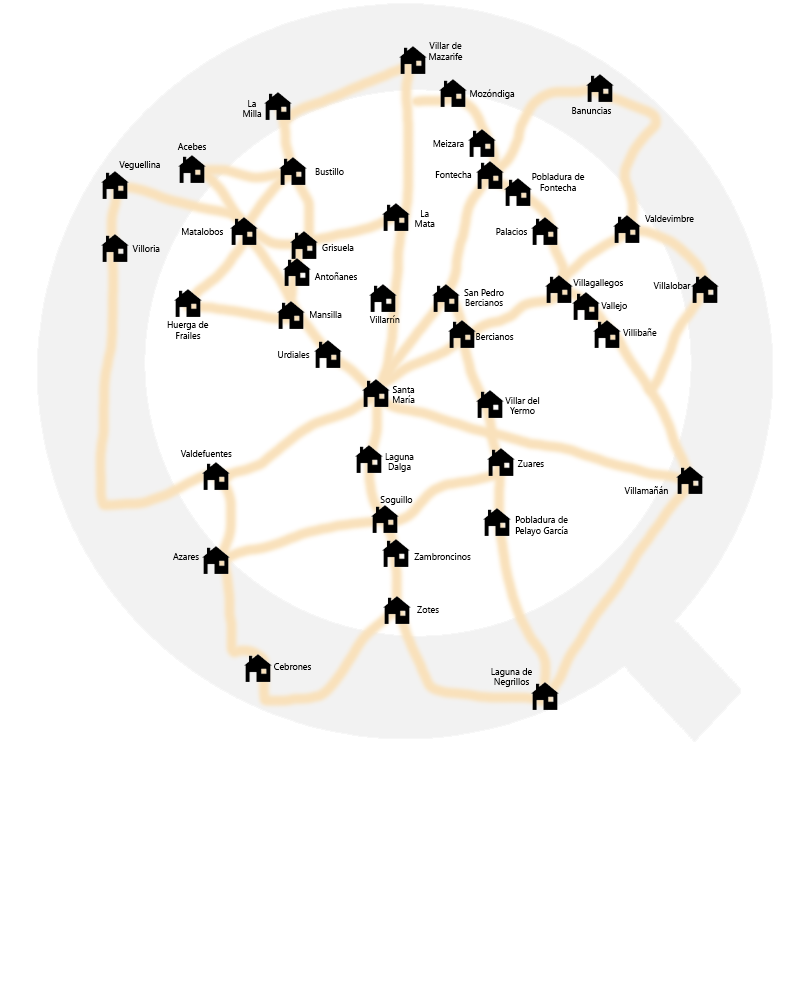
<style>
.page{position:relative;width:800px;height:1000px;background:#ffffff}
.page>*{position:absolute;margin:0}
.t1{font:9px "NirmalaUI";color:#000000}
</style>
<div class="page">
<p class="t1" style="left:429px;top:42px;width:34px;height:18px;text-align:center">Villar de Mazarife</p>
<p class="t1" style="left:470px;top:89px;width:45px;height:10px">Mozóndiga</p>
<p class="t1" style="left:243px;top:100px;width:19px;height:17px;text-align:center">La Milla</p>
<p class="t1" style="left:572px;top:107px;width:39px;height:7px">Banuncias</p>
<p class="t1" style="left:177px;top:143px;width:29px;height:7px">Acebes</p>
<p class="t1" style="left:433px;top:140px;width:31px;height:7px">Meizara</p>
<p class="t1" style="left:119px;top:161px;width:41px;height:9px">Veguellina</p>
<p class="t1" style="left:315px;top:168px;width:29px;height:7px">Bustillo</p>
<p class="t1" style="left:435px;top:171px;width:37px;height:7px">Fontecha</p>
<p class="t1" style="left:532px;top:173px;width:53px;height:18px;text-align:center">Pobladura de Fontecha</p>
<p class="t1" style="left:415px;top:210px;width:20px;height:17px;text-align:center">La Mata</p>
<p class="t1" style="left:645px;top:215px;width:49px;height:7px">Valdevimbre</p>
<p class="t1" style="left:182px;top:228px;width:41px;height:7px">Matalobos</p>
<p class="t1" style="left:496px;top:228px;width:31px;height:7px">Palacios</p>
<p class="t1" style="left:132px;top:245px;width:28px;height:7px">Villoria</p>
<p class="t1" style="left:322px;top:244px;width:32px;height:7px">Grisuela</p>
<p class="t1" style="left:314px;top:272px;width:43px;height:8px">Antoñanes</p>
<p class="t1" style="left:573px;top:279px;width:50px;height:9px">Villagallegos</p>
<p class="t1" style="left:464px;top:289px;width:40px;height:17px;text-align:center">San Pedro Bercianos</p>
<p class="t1" style="left:653px;top:282px;width:38px;height:7px">Villalobar</p>
<p class="t1" style="left:601px;top:302px;width:26px;height:9px">Vallejo</p>
<p class="t1" style="left:310px;top:311px;width:32px;height:7px">Mansilla</p>
<p class="t1" style="left:369px;top:315px;width:31px;height:8px">Villarrín</p>
<p class="t1" style="left:167px;top:321px;width:42px;height:18px;text-align:center">Huerga de Frailes</p>
<p class="t1" style="left:623px;top:328px;width:34px;height:8px">Villibañe</p>
<p class="t1" style="left:476px;top:333px;width:38px;height:7px">Bercianos</p>
<p class="t1" style="left:278px;top:351px;width:32px;height:7px">Urdiales</p>
<p class="t1" style="left:392px;top:386px;width:23px;height:17px;text-align:center">Santa María</p>
<p class="t1" style="left:505px;top:397px;width:35px;height:17px;text-align:center">Villar del Yermo</p>
<p class="t1" style="left:180px;top:450px;width:52px;height:7px">Valdefuentes</p>
<p class="t1" style="left:385px;top:453px;width:29px;height:19px;text-align:center">Laguna Dalga</p>
<p class="t1" style="left:517px;top:460px;width:27px;height:7px">Zuares</p>
<p class="t1" style="left:624px;top:486px;width:44px;height:8px">Villamañán</p>
<p class="t1" style="left:380px;top:496px;width:33px;height:9px">Soguillo</p>
<p class="t1" style="left:515px;top:516px;width:53px;height:20px;text-align:center">Pobladura de Pelayo García</p>
<p class="t1" style="left:173px;top:553px;width:26px;height:7px">Azares</p>
<p class="t1" style="left:414px;top:553px;width:57px;height:7px">Zambroncinos</p>
<p class="t1" style="left:417px;top:606px;width:22px;height:7px">Zotes</p>
<p class="t1" style="left:274px;top:663px;width:37px;height:7px">Cebrones</p>
<p class="t1" style="left:491px;top:668px;width:41px;height:19px;text-align:center">Laguna de Negrillos</p>
</div>
